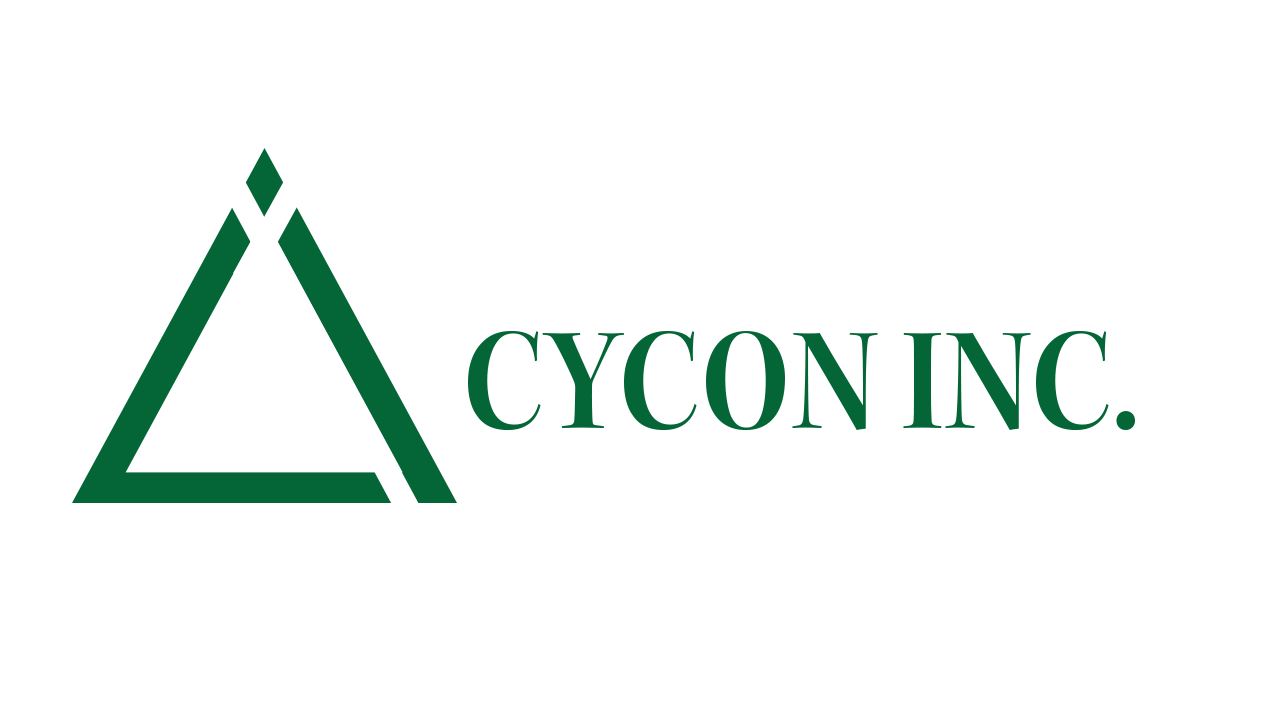
<style>
.page{position:relative;width:1280px;height:720px;background:#ffffff}
.page>*{position:absolute;margin:0}
.t1{font:150px "KeplerStd-SemiboldScnDisp";letter-spacing:0.005em;color:#046637;scale:1.05 1}
</style>
<div class="page">
<p class="t1" style="left:468px;top:330px;width:667px;height:101px">CYCON INC.</p>
</div>
